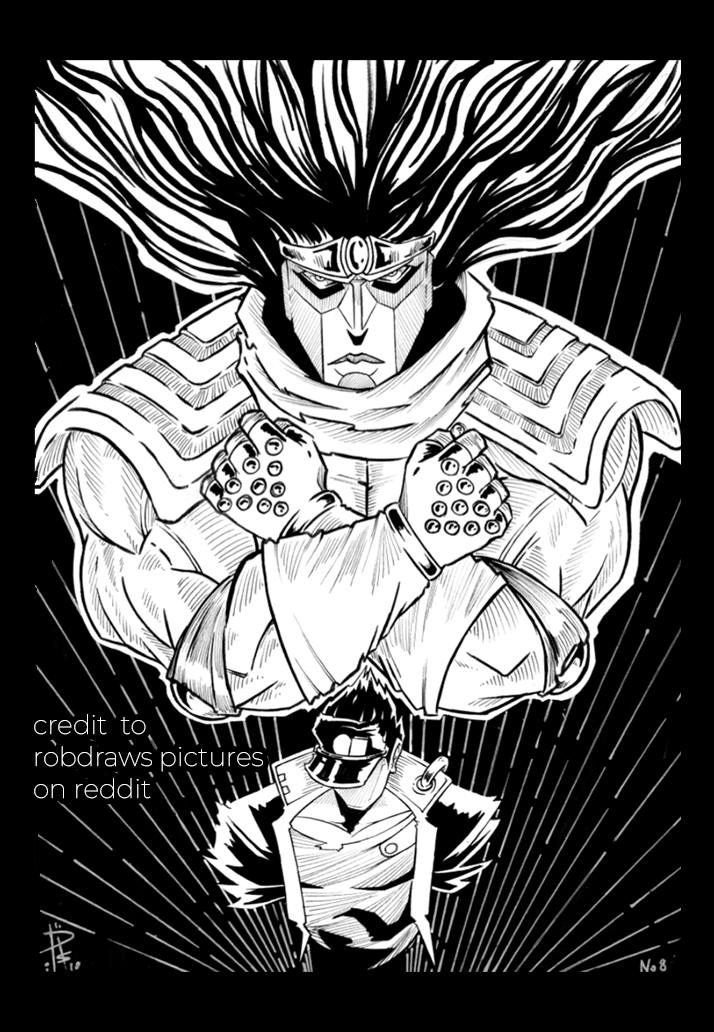
<style>
.page{position:relative;width:714px;height:1032px;background:#000000}
.page>*{position:absolute;margin:0}
.t1{font:26.5px "Montserrat-Thin";color:#ffffff}
</style>
<div class="page">
<p class="t1" style="left:34px;top:714px;width:229px;height:85px">credit  to <br>robdraws pictures <br>on reddit</p>
</div>
